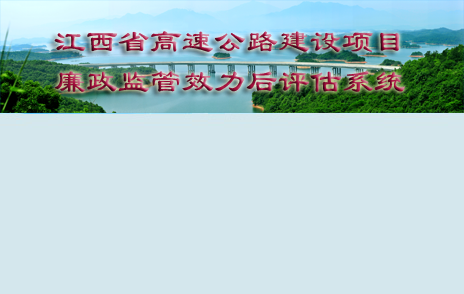
<style>
.page{position:relative;width:464px;height:294px;background:#d4e7ed}
.page>*{position:absolute;margin:0}
.t1{font:32px/40px "LiSu"}
</style>
<div class="page">
<p class="t1" style="left:54px;top:31px;width:351px;height:61px">江西省高速公路建设项目<br>廉政监管效力后评估系统</p>
</div>
